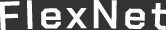
<style>
.page{position:relative;width:166px;height:30px;background:#333333}
.page>*{position:absolute;margin:0}
.t1{font:40px "ChakraPetch-SemiBold";letter-spacing:0.1em;color:#fdfdfd}
</style>
<div class="page">
<p class="t1" style="left:0px;top:0px;width:167px;height:30px">FlexNet</p>
</div>
